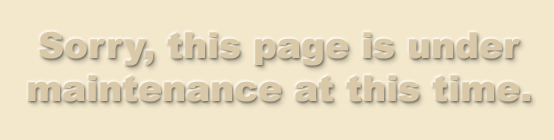
<style>
.page{position:relative;width:554px;height:140px;background:#f3e8cc}
.page>*{position:absolute;margin:0}
.t1{font:36px "Arial-Black";color:#dac9a9}
</style>
<div class="page">
<p class="t1" style="left:28px;top:31px;width:502px;height:71px;text-align:center">Sorry, this page is under<br>maintenance at this time.</p>
</div>
